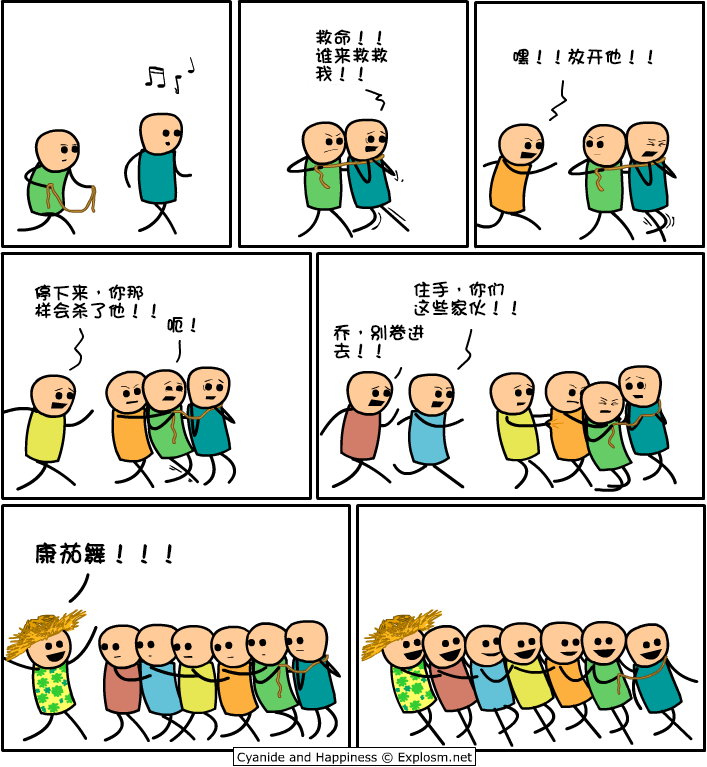
<style>
.page{position:relative;width:707px;height:767px;background:#ffffff}
.page>*{position:absolute;margin:0}
.t1{font:18px/18px "DFGirl";color:#000000;font-weight:bold}
.t2{font:18px "DFGirl";color:#000000;font-weight:bold}
.t3{font:24px "DFGirl";color:#000000;font-weight:bold}
</style>
<div class="page">
<p class="t1" style="left:315px;top:29px;width:73px;height:53px">救命！！<br>谁来救救<br>我！！</p>
<p class="t2" style="left:513px;top:48px;width:140px;height:17px">嘿！！放开他！！</p>
<p class="t1" style="left:414px;top:281px;width:103px;height:35px">住手，你们<br>这些家伙！！</p>
<p class="t1" style="left:34px;top:284px;width:122px;height:35px">停下来，你那<br>样会杀了他！！</p>
<p class="t2" style="left:167px;top:317px;width:29px;height:16px">呃！</p>
<p class="t1" style="left:333px;top:324px;width:91px;height:35px">乔，别卷进<br>去！！</p>
<p class="t3" style="left:36px;top:542px;width:136px;height:23px">康茄舞！！！</p>
</div>
